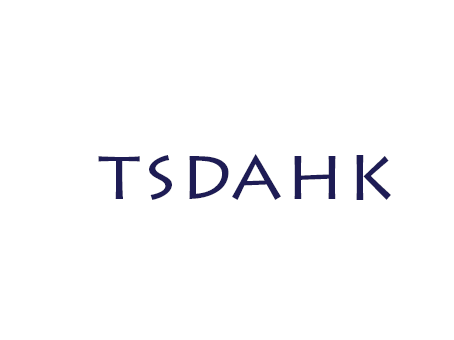
<style>
.page{position:relative;width:454px;height:340px;background:#ffffff}
.page>*{position:absolute;margin:0}
.t1{font:72px "LithosPro-Regular";letter-spacing:0.04em;color:#1e1c55}
</style>
<div class="page">
<p class="t1" style="left:98px;top:154px;width:293px;height:46px">tsdahk</p>
</div>
